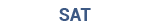
<style>
.page{position:relative;width:145px;height:28px;background:#ffffff}
.page>*{position:absolute;margin:0}
.t1{font:18px "Roboto-Bold";letter-spacing:-0.005em;color:#3d5984}
</style>
<div class="page">
<p class="t1" style="left:59px;top:8px;width:32px;height:13px">SAT</p>
</div>
